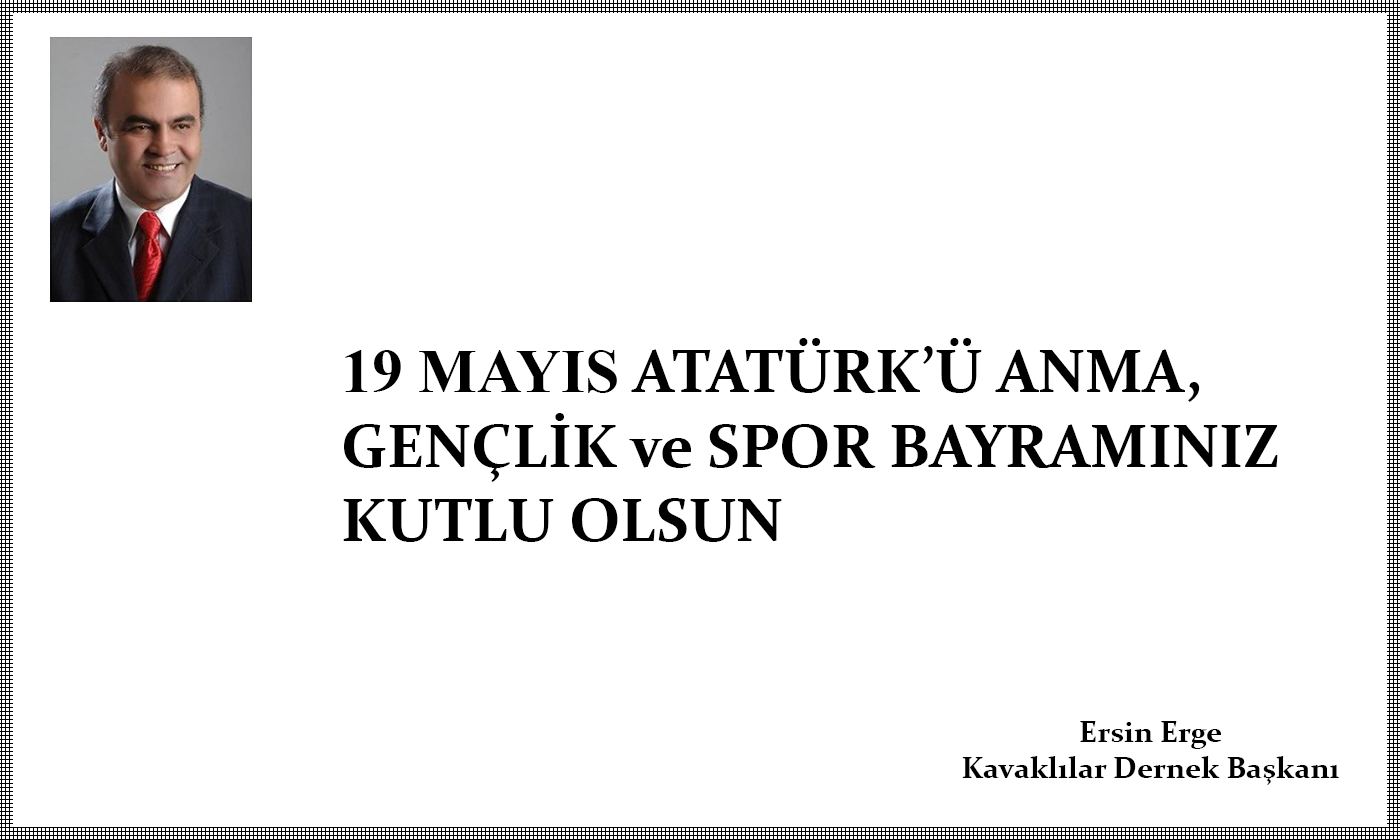
<style>
.page{position:relative;width:1400px;height:840px;background:#ffffff}
.page>*{position:absolute;margin:0}
.t1{font:62px "Constantia-Bold";color:#000000}
.t2{font:62px "TimesNewRomanPS-BoldMT";color:#000000}
.t3{font:30px "Constantia-Bold";color:#000000}
</style>
<div class="page">
<p class="t1" style="left:343px;top:338px;width:935px;height:204px"><span class="t2">19 MAYIS</span> ATATÜRK’Ü ANMA, GENÇLİK ve SPOR BAYRAMINIZ<br>KUTLU OLSUN</p>
<p class="t3" style="left:962px;top:721px;width:377px;height:64px;text-align:center">Ersin Erge<br>Kavaklılar Dernek Başkanı</p>
</div>
